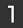
<style>
.page{position:relative;width:23px;height:28px;background:#333333}
.page>*{position:absolute;margin:0}
.t1{font:24px "Outfit-Regular";color:#ffffff;font-weight:bold;font-style:italic}
</style>
<div class="page">
<p class="t1" style="left:8px;top:5px;width:6px;height:18px">1</p>
</div>
